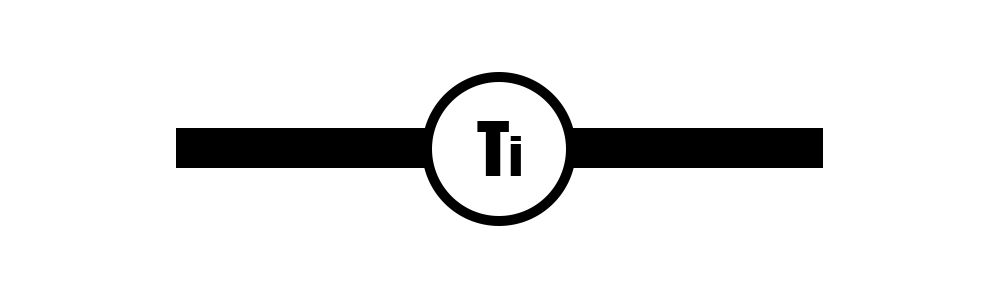
<style>
.page{position:relative;width:1000px;height:300px;background:#ffffff}
.page>*{position:absolute;margin:0}
.t1{font:70px "Impact";color:#000000}
.t2{font:50px "Impact";color:#000000}
</style>
<div class="page">
<p class="t1" style="left:477px;top:121px;width:44px;height:55px">T<span class="t2">i</span></p>
</div>
